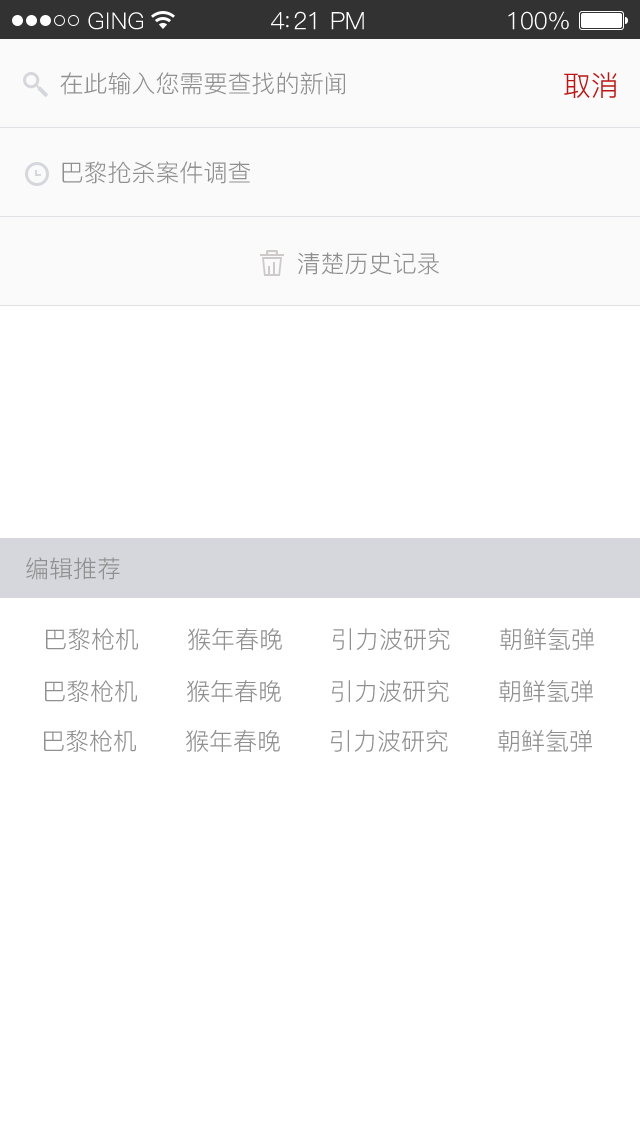
<style>
.page{position:relative;width:640px;height:1136px;background:#ffffff}
.page>*{position:absolute;margin:0}
.t1{font:23px "PingFang-SC-Regular";letter-spacing:0.02em;color:#ffffff}
.t2{font:24px "PingFang-SC-Regular";letter-spacing:-0.02em;color:#ffffff}
.t3{font:24px "PingFang-SC-Regular";color:#909090}
.t4{font:28px "PingFang-SC-Regular";color:#bb1515}
.t5{font:23.9px "PingFang-SC-Regular";color:#909090}
</style>
<div class="page">
<p class="t1" style="left:88px;top:12px;width:55px;height:18px">GING</p>
<p class="t2" style="left:271px;top:11px;width:93px;height:19px">4:21 PM</p>
<p class="t2" style="left:508px;top:11px;width:61px;height:19px">100%</p>
<p class="t3" style="left:60px;top:72px;width:285px;height:23px">在此输入您需要查找的新闻</p>
<p class="t4" style="left:564px;top:72px;width:53px;height:26px">取消</p>
<p class="t3" style="left:62px;top:161px;width:189px;height:23px">巴黎抢杀案件调查</p>
<p class="t3" style="left:298px;top:252px;width:141px;height:23px">清楚历史记录</p>
<p class="t3" style="left:26px;top:557px;width:94px;height:23px">编辑推荐</p>
<p class="t5" style="left:46px;top:628px;width:548px;height:23px">巴黎枪机      猴年春晚      引力波研究      朝鲜氢弹</p>
<p class="t5" style="left:45px;top:680px;width:548px;height:23px">巴黎枪机      猴年春晚      引力波研究      朝鲜氢弹</p>
<p class="t5" style="left:44px;top:729px;width:548px;height:23px">巴黎枪机      猴年春晚      引力波研究      朝鲜氢弹</p>
</div>
